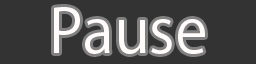
<style>
.page{position:relative;width:256px;height:64px;background:#333333}
.page>*{position:absolute;margin:0}
.t1{font:60px "HiraKakuProN-W3";color:#fffbfb}
</style>
<div class="page">
<p class="t1" style="left:54px;top:7px;width:151px;height:47px">Pause</p>
</div>
